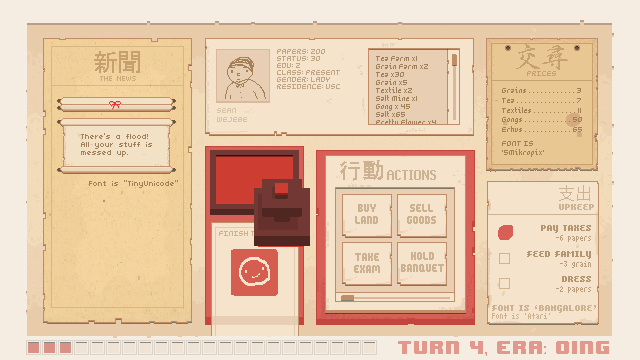
<style>
.page{position:relative;width:640px;height:360px}
.page>*{position:absolute;margin:0}
.t1{font:24.5px "MS-UIGothic";color:#c7a070}
.t2{font:8px/7px "5Mikropix";color:#c1a683}
.t3{font:28.5px "DFXingShuMedium1B";color:#c7a070}
.t4{font:8px/8px "5Mikropix";color:#a38158}
.t5{font:8px "04b03";color:#ccab7e}
.t6{font:8px "5Mikropix";color:#c7a070}
.t7{font:8px "5Mikropix";color:#a38158}
.t8{font:8px "5Mikropix";color:#dbc2a1}
.t9{font:16px/8px "TinyUnicode";color:#a38158}
.t10{font:21.8px "AdobeGothicStd-Bold";color:#ccb291}
.t11{font:16px "RuneScape-UF";color:#ccb291}
.t12{font:16px "TinyUnicode";color:#a38158}
.t13{font:17.2px "KozGoPr6N-Regular";color:#ccb291}
.t14{font:8px "Bangalore";color:#ccb291}
.t15{font:8px "Bangalore";color:#a38158}
.t16{font:8px "AtariSmall";color:#bb9f7a}
.t17{font:8px "AtariSmall";color:#ccb291}
.t18{font:16px "8BITWONDERNominal";color:#e3988e}
.t19{font:16px "Typeecanoe";color:#e3988e}
</style>
<div class="page">
<p class="t1" style="left:94px;top:51px;width:46px;height:22px">新聞</p>
<p class="t2" style="left:277px;top:49px;width:63px;height:40px">PAPERS: 200<br>STATUS: 30<br>EDU: 2<br>CLASS: PRESENT<br>GENDER: LADY<br>RESIDENCE: USC</p>
<p class="t3" style="left:516px;top:44px;width:52px;height:26px">價格</p>
<p class="t4" style="left:376px;top:56px;width:60px;height:71px">Tea Farm x1<br>Grain Farm x2<br>Tea x30<br>Grain x5<br>Textile x2<br>Salt Mine x1<br>Gong x 45<br>Salt x65<br>Pretty Flower x4</p>
<p class="t5" style="left:100px;top:76px;width:36px;height:5px">THE NEWS</p>
<p class="t6" style="left:527px;top:71px;width:29px;height:5px">PRICES</p>
<p class="t7" style="left:502px;top:87px;width:80px;height:45px">Grains . . . . . . . . . . . . 3<br>Tea . . . . . . . . . . . . . . . 7<br>Textiles . . . . . . . . . . . 11<br>Gongs . . . . . . . . . . . . 50<br>Erhus . . . . . . . . . . . . 65</p>
<p class="t8" style="left:217px;top:108px;width:30px;height:14px">SEAN<br>WEJEBE</p>
<p class="t9" style="left:81px;top:133px;width:71px;height:24px">There's a flood!<br>All your stuff is<br>messed up.</p>
<p class="t7" style="left:502px;top:141px;width:42px;height:16px">FONT IS<br>‘5Mikropix’</p>
<p class="t10" style="left:340px;top:160px;width:43px;height:21px">行動</p>
<p class="t11" style="left:387px;top:170px;width:49px;height:10px">ACTIONS</p>
<p class="t12" style="left:89px;top:180px;width:89px;height:8px">Font is "TinyUnicode"</p>
<p class="t13" style="left:559px;top:185px;width:31px;height:16px">支出</p>
<p class="t14" style="left:559px;top:204px;width:35px;height:6px">UPKEEP</p>
<p class="t15" style="left:541px;top:225px;width:50px;height:8px;opacity:0.8">PAY TAXES</p>
<p class="t16" style="left:556px;top:235px;width:35px;height:7px">-6 papers</p>
<p class="t15" style="left:527px;top:251px;width:64px;height:8px;opacity:0.8">FEED FAMILY</p>
<p class="t16" style="left:560px;top:261px;width:31px;height:7px">-3 grain</p>
<p class="t15" style="left:562px;top:276px;width:29px;height:6px;opacity:0.8">DRESS</p>
<p class="t16" style="left:556px;top:286px;width:35px;height:7px">-2 papers</p>
<p class="t14" style="left:492px;top:305px;width:104px;height:8px">FONT IS ‘BANGALORE’</p>
<p class="t17" style="left:492px;top:313px;width:58px;height:6px">Font is 'Atari'</p>
<p class="t18" style="left:398px;top:341px;width:211px;height:15px">TURN 4<span class="t19">,</span> ERA<span class="t19">:</span> QING</p>
</div>
